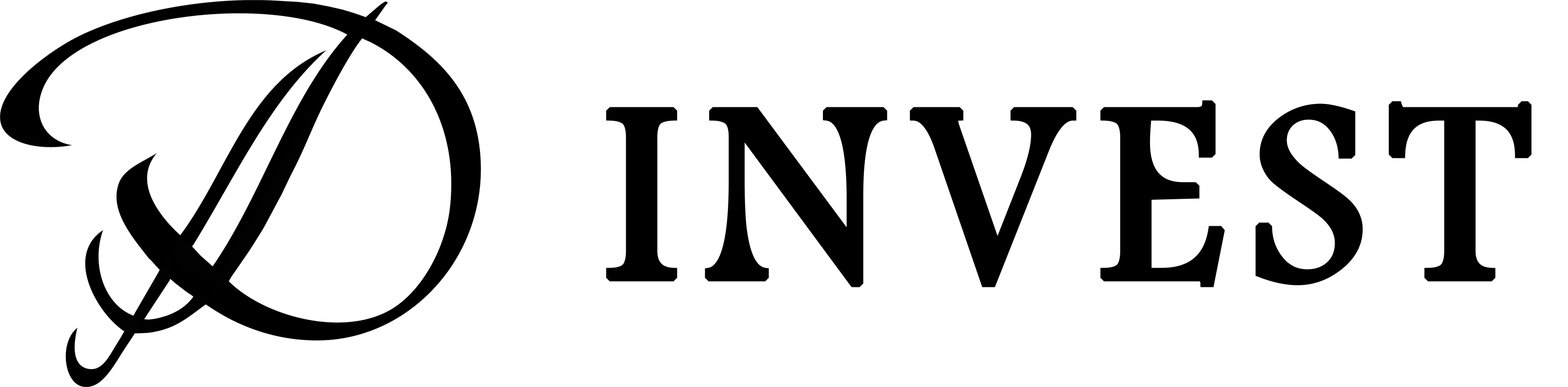
<style>
.page{position:relative;width:1568px;height:387px;background:#ffffff}
.page>*{position:absolute;margin:0}
.t1{font:266.9px "Andalus";letter-spacing:0.06em;color:#000000;text-transform:uppercase;font-weight:bold}
</style>
<div class="page">
<p class="t1" style="left:606px;top:100px;width:926px;height:187px">invest</p>
</div>
